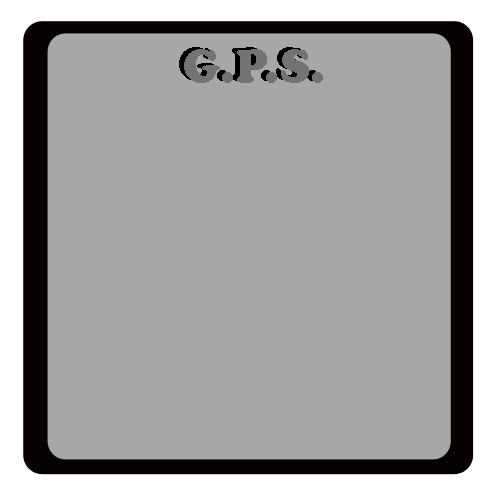
<style>
.page{position:relative;width:500px;height:500px;background:#a7a7a7}
.page>*{position:absolute;margin:0}
.t1{font:48px "CooperBlack"}
</style>
<div class="page">
<p class="t1" style="left:179px;top:47px;width:139px;height:34px">G.P.S.</p>
</div>
